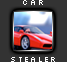
<style>
.page{position:relative;width:67px;height:62px;background:#333333}
.page>*{position:absolute;margin:0}
.t1{font:9px "Silkscreen-Expanded";color:#ffffff}
</style>
<div class="page">
<p class="t1" style="left:23px;top:0px;width:20px;height:5px">CAR</p>
<p class="t1" style="left:11px;top:57px;width:44px;height:5px">STEALER</p>
</div>
